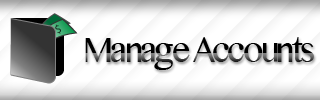
<style>
.page{position:relative;width:320px;height:100px}
.page>*{position:absolute;margin:0}
.t1{font:41.7px "KhmerMN";letter-spacing:-0.065em;scale:0.9 1}
</style>
<div class="page">
<p class="t1" style="left:85px;top:37px;width:229px;height:33px">Manage Accounts</p>
</div>
